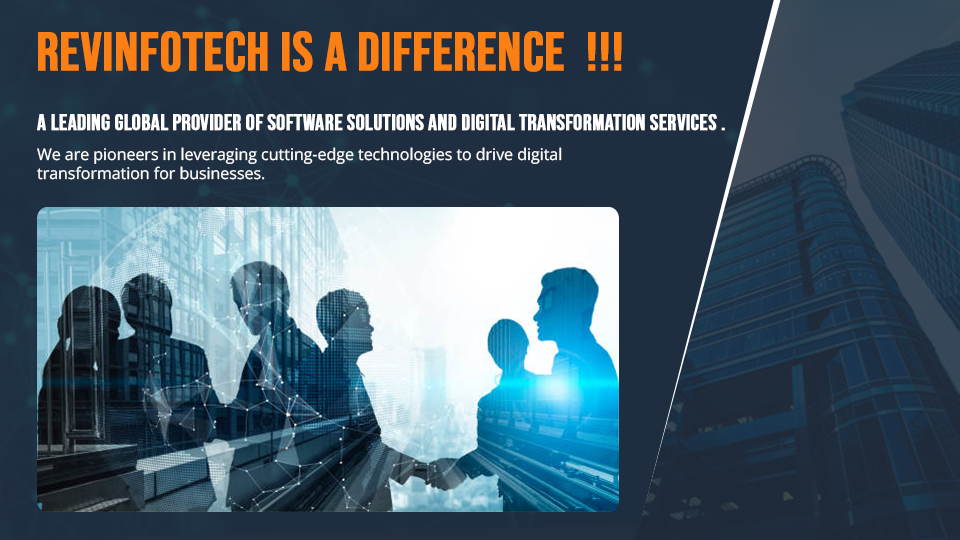
<style>
.page{position:relative;width:960px;height:540px}
.page>*{position:absolute;margin:0}
.t1{font:54px "BebasNeue-Regular";color:#fb7f12;font-weight:bold}
.t2{font:22px "BebasNeue-Regular";color:#ffffff;font-weight:bold}
.t3{font:16px "OpenSans-Regular";color:#ffffff}
</style>
<div class="page">
<p class="t1" style="left:38px;top:31px;width:584px;height:41px">Revinfotech is a difference  !!!</p>
<p class="t2" style="left:37px;top:114px;width:688px;height:17px">A leading global provider of software solutions and digital transformation services .</p>
<p class="t3" style="left:37px;top:147px;width:525px;height:33px">We are pioneers in leveraging cutting-edge technologies to drive digital<br>transformation for businesses.</p>
</div>
